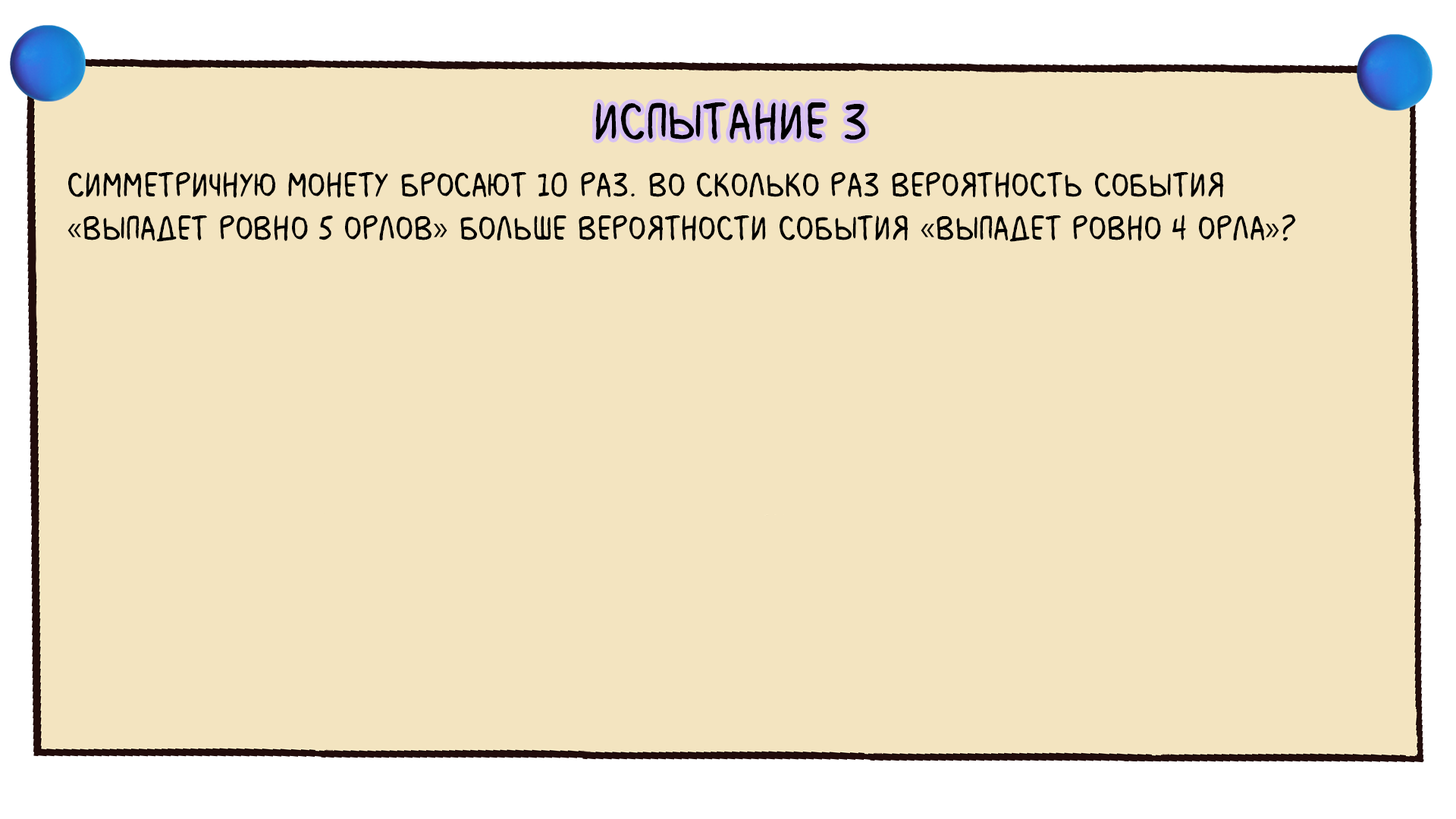
<style>
.page{position:relative;width:1456px;height:819px;background:#f3e4c0}
.page>*{position:absolute;margin:0}
.t1{font:54.6px "MilkMustacheBB";color:#000000}
.t2{font:36.4px "MilkMustacheBB";color:#000000}
.t3{font:36.4px "MyriadPro-Regular";color:#000000}
</style>
<div class="page">
<p class="t1" style="left:595px;top:102px;width:271px;height:39px">испытание 3</p>
<p class="t2" style="left:67px;top:171px;width:1229px;height:71px">Симметричную монету бросают 10 раз. Во сколько раз вероятность события <br><span class="t3">«</span>выпадет ровно 5 орлов<span class="t3">»</span> больше вероятности события <span class="t3">«</span>выпадет ровно 4 орла<span class="t3">»</span>?</p>
</div>
